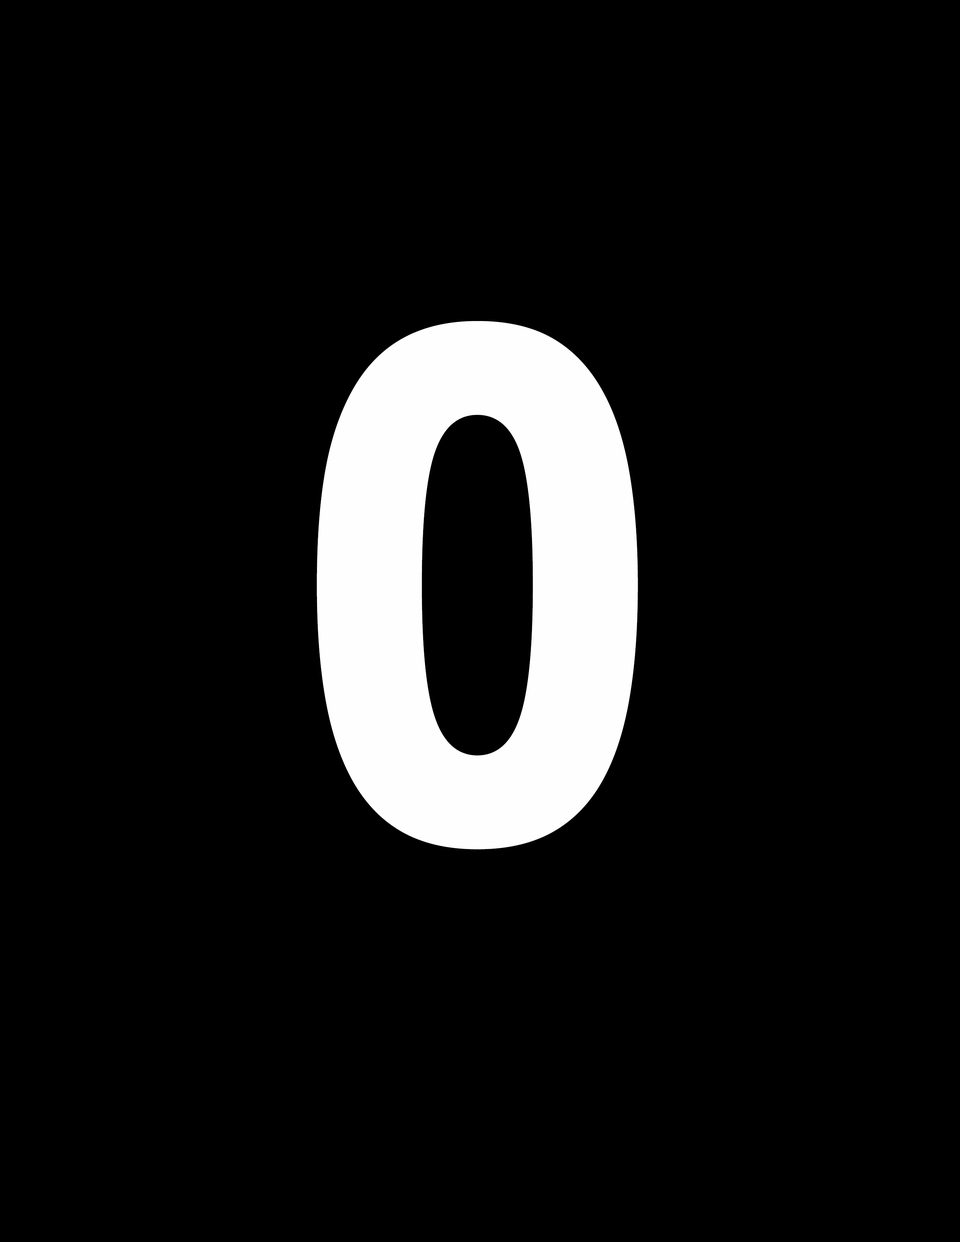
<style>
.page{position:relative;width:960px;height:1242px;background:#000000}
.page>*{position:absolute;margin:0}
.t1{font:698px "Tahoma-Bold";color:#fefefe;scale:0.82 1}
</style>
<div class="page">
<p class="t1" style="left:317px;top:321px;width:321px;height:529px">0</p>
</div>
